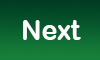
<style>
.page{position:relative;width:100px;height:60px}
.page>*{position:absolute;margin:0}
.t1{font:27.7px "ArialRoundedMTBold";color:#ffffff;scale:0.96 1}
</style>
<div class="page">
<p class="t1" style="left:23px;top:20px;width:58px;height:20px">Next</p>
</div>
